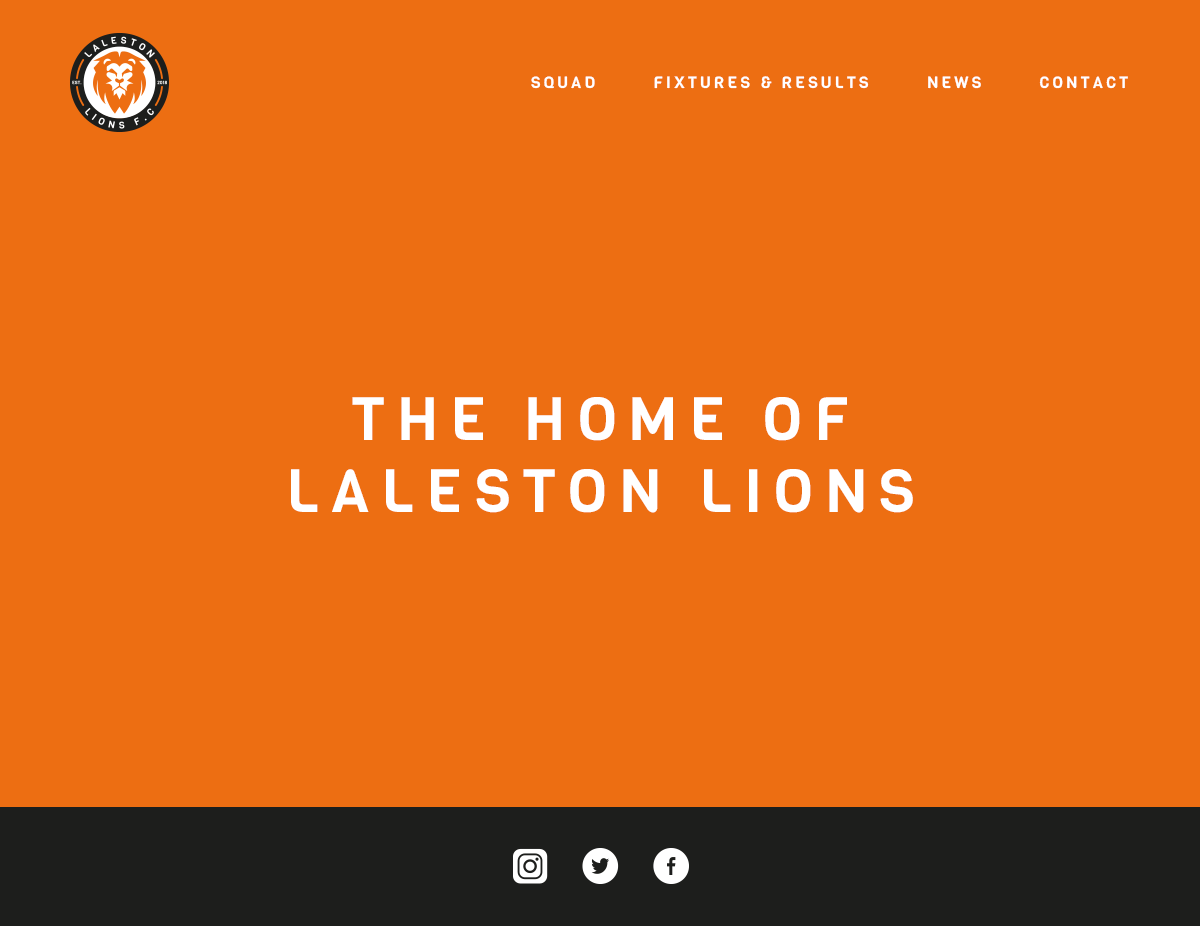
<style>
.page{position:relative;width:1200px;height:926px;background:#ed6e12}
.page>*{position:absolute;margin:0}
.t1{font:16px "Viga-Regular";letter-spacing:0.2em;color:#ffffff;text-transform:uppercase}
.t2{font:60px "Viga-Regular";letter-spacing:0.2em;color:#ffffff}
</style>
<div class="page">
<p class="t1" style="left:531px;top:76px;width:597px;height:13px">SQUAD        FIXTURES &amp; RESULTS        NEWS        CONTACT</p>
<p class="t2" style="left:291px;top:397px;width:622px;height:116px;text-align:center">THE HOME OF <br>LALESTON LIONS</p>
</div>
